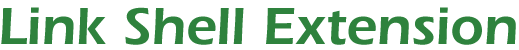
<style>
.page{position:relative;width:519px;height:50px;background:#ffffff}
.page>*{position:absolute;margin:0}
.t1{font:54px "ErieBlackPlain";color:#2e823d}
</style>
<div class="page">
<p class="t1" style="left:1px;top:7px;width:515px;height:38px">Link Shell Extension</p>
</div>
